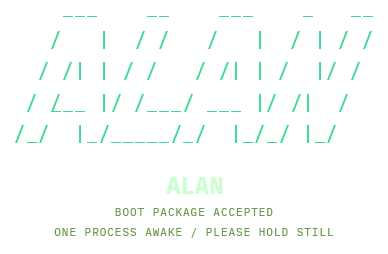
<style>
.page{position:relative;width:388px;height:254px;background:#ffffff}
.page>*{position:absolute;margin:0}
.t1{font:23.8px "IBMPlexMono-Bold";color:#caffcf}
.t2{font:10.8px "IBMPlexMono";letter-spacing:0.1em;color:#6e9a50;text-transform:uppercase}
</style>
<div class="page">
<p class="t1" style="left:166px;top:177px;width:57px;height:17px">ALAN</p>
<p class="t2" style="left:115px;top:208px;width:158px;height:8px">boot package accepted</p>
<p class="t2" style="left:54px;top:228px;width:279px;height:10px">one process awake / please hold still</p>
</div>
